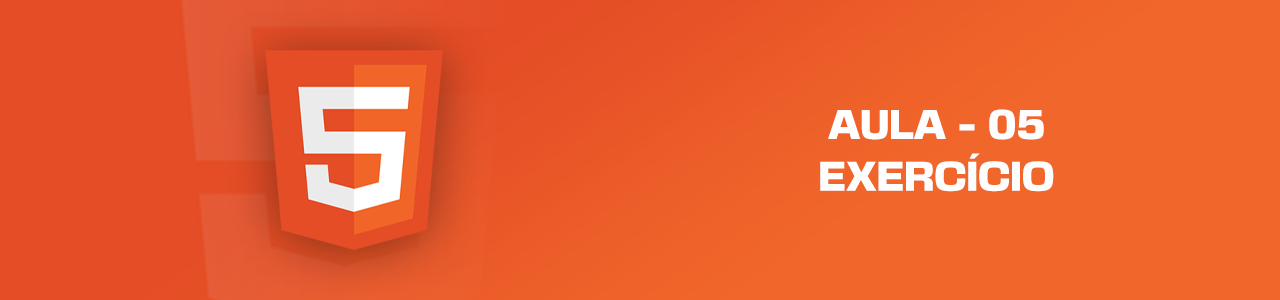
<style>
.page{position:relative;width:1280px;height:300px;background:#f1662a}
.page>*{position:absolute;margin:0}
.t1{font:37.3px "BasementGrotesque-Black";color:#fefefe;text-transform:uppercase}
.t2{font:37.3px "BasementGrotesque-Black";color:#fefefe}
</style>
<div class="page">
<p class="t1" style="left:828px;top:109px;width:216px;height:31px">aula - 0<span class="t2">5</span></p>
<p class="t1" style="left:820px;top:153px;width:234px;height:39px">Exercício</p>
</div>
